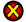
<style>
.page{position:relative;width:26px;height:22px;background:#ffffff}
.page>*{position:absolute;margin:0}
.t1{font:15.6px "ArialRoundedMTBold";color:#fff000;scale:1.27 1}
</style>
<div class="page">
<p class="t1" style="left:7px;top:5px;width:12px;height:12px">X</p>
</div>
